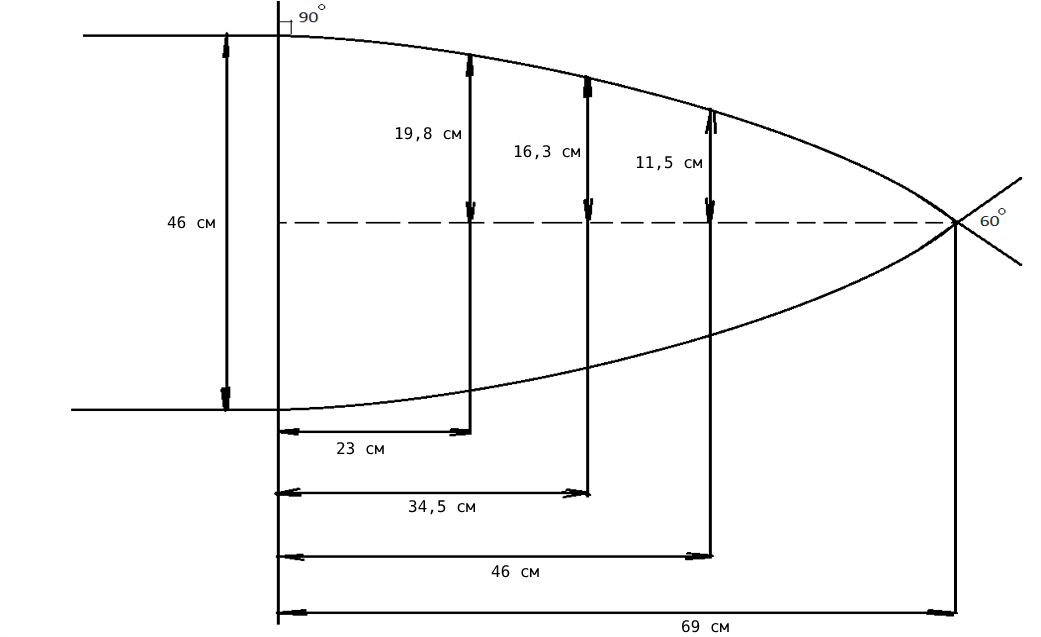
<style>
.page{position:relative;width:1041px;height:637px;background:#ffffff}
.page>*{position:absolute;margin:0}
.t1{font:16px "DejaVuSansMono";color:#000000}
</style>
<div class="page">
<p class="t1" style="left:395px;top:127px;width:67px;height:15px">19,8 см</p>
<p class="t1" style="left:514px;top:145px;width:67px;height:15px">16,3 см</p>
<p class="t1" style="left:636px;top:156px;width:67px;height:15px">11,5 см</p>
<p class="t1" style="left:167px;top:216px;width:48px;height:13px">46 см</p>
<p class="t1" style="left:337px;top:442px;width:47px;height:13px">23 см</p>
<p class="t1" style="left:409px;top:500px;width:67px;height:15px">34,5 см</p>
<p class="t1" style="left:491px;top:565px;width:48px;height:13px">46 см</p>
<p class="t1" style="left:682px;top:620px;width:47px;height:13px">69 см</p>
</div>
